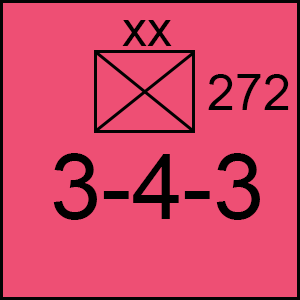
<style>
.page{position:relative;width:300px;height:300px;background:#ee4f74}
.page>*{position:absolute;margin:0}
.t1{font:50px "ArialMT";color:#000000}
.t2{font:91.7px "ArialMT";color:#000000}
</style>
<div class="page">
<p class="t1" style="left:122px;top:20px;width:50px;height:26px">xx</p>
<p class="t1" style="left:208px;top:74px;width:81px;height:36px">272</p>
<p class="t2" style="left:53px;top:153px;width:207px;height:67px">3-4-3</p>
</div>
